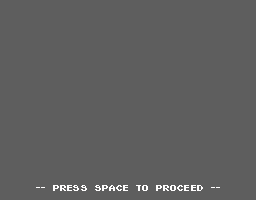
<style>
.page{position:relative;width:256px;height:200px;background:#5e5e5e}
.page>*{position:absolute;margin:0}
.t1{font:9px "PixelEmulator";color:#fffefe}
</style>
<div class="page">
<p class="t1" style="left:36px;top:185px;width:184px;height:6px">-- Press Space to Proceed --</p>
</div>
